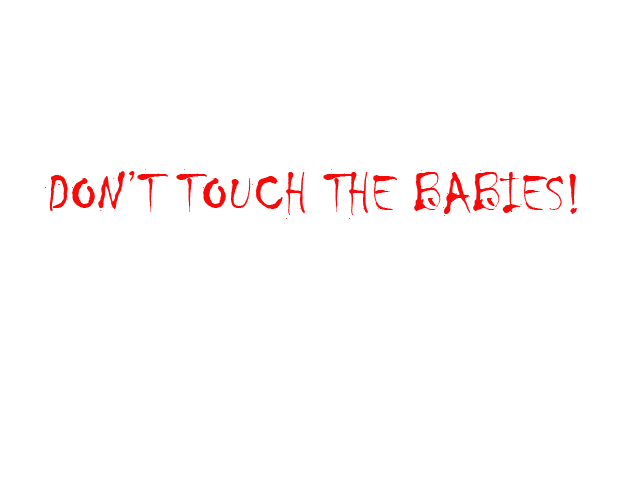
<style>
.page{position:relative;width:630px;height:500px;background:#ffffff}
.page>*{position:absolute;margin:0}
.t1{font:58.3px "Chiller-Regular";color:#f80909}
</style>
<div class="page">
<p class="t1" style="left:44px;top:169px;width:533px;height:50px">DON’T TOUCH THE BABIES!</p>
</div>
